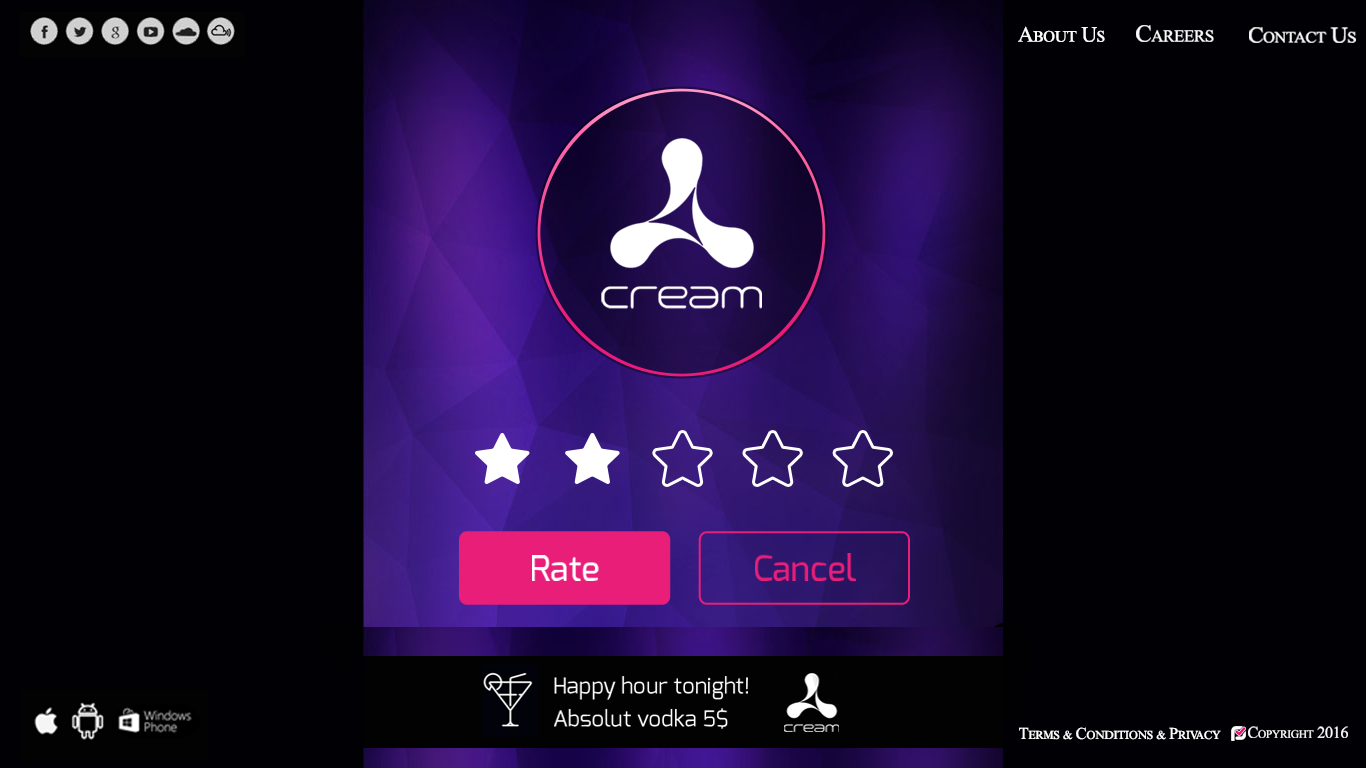
<style>
.page{position:relative;width:1366px;height:768px;background:#010004}
.page>*{position:absolute;margin:0}
.t1{font:21.9px "TimesNewRomanPSMT";letter-spacing:-0.025em;color:#fdfcfc;font-variant:small-caps}
.t2{font:24.3px "TimesNewRomanPSMT";letter-spacing:-0.025em;color:#fdfcfc;font-variant:small-caps}
.t3{font:22.2px "TimesNewRomanPSMT";letter-spacing:-0.025em;color:#fdfcfc;font-variant:small-caps;scale:1.05 1}
.t4{font:34.9px "Exo-Medium";color:#ffffff}
.t5{font:34.9px "Exo-Medium";color:#e81e79}
.t6{font:22.4px/32.9px "Exo-Regular";color:#ffffff}
.t7{font:16.3px "TimesNewRomanPSMT";letter-spacing:-0.025em;color:#fdfcfc;font-variant:small-caps}
.t8{font:16.5px "TimesNewRomanPSMT";letter-spacing:-0.025em;color:#fdfcfc;font-variant:small-caps}
</style>
<div class="page">
<p class="t1" style="left:1018px;top:26px;width:87px;height:16px">About Us</p>
<p class="t2" style="left:1136px;top:25px;width:78px;height:17px">Careers</p>
<p class="t3" style="left:1249px;top:27px;width:107px;height:16px">Contact Us</p>
<p class="t4" style="left:532px;top:555px;width:67px;height:26px">Rate</p>
<p class="t5" style="left:755px;top:553px;width:101px;height:28px">Cancel</p>
<p class="t6" style="left:554px;top:676px;width:194px;height:53px">Happy hour tonight!<br>Absolut vodka 5$</p>
<p class="t7" style="left:1248px;top:726px;width:100px;height:12px">Copyright 2016</p>
<p class="t8" style="left:1019px;top:727px;width:202px;height:13px">Terms &amp; Conditions &amp; Privacy</p>
</div>
